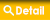
<style>
.page{position:relative;width:50px;height:20px;background:#ffc000}
.page>*{position:absolute;margin:0}
.t1{font:11.3px "CenturyGothic-Bold";color:#fefcfc;scale:0.93 1}
</style>
<div class="page">
<p class="t1" style="left:16px;top:6px;width:28px;height:9px">Detail</p>
</div>
